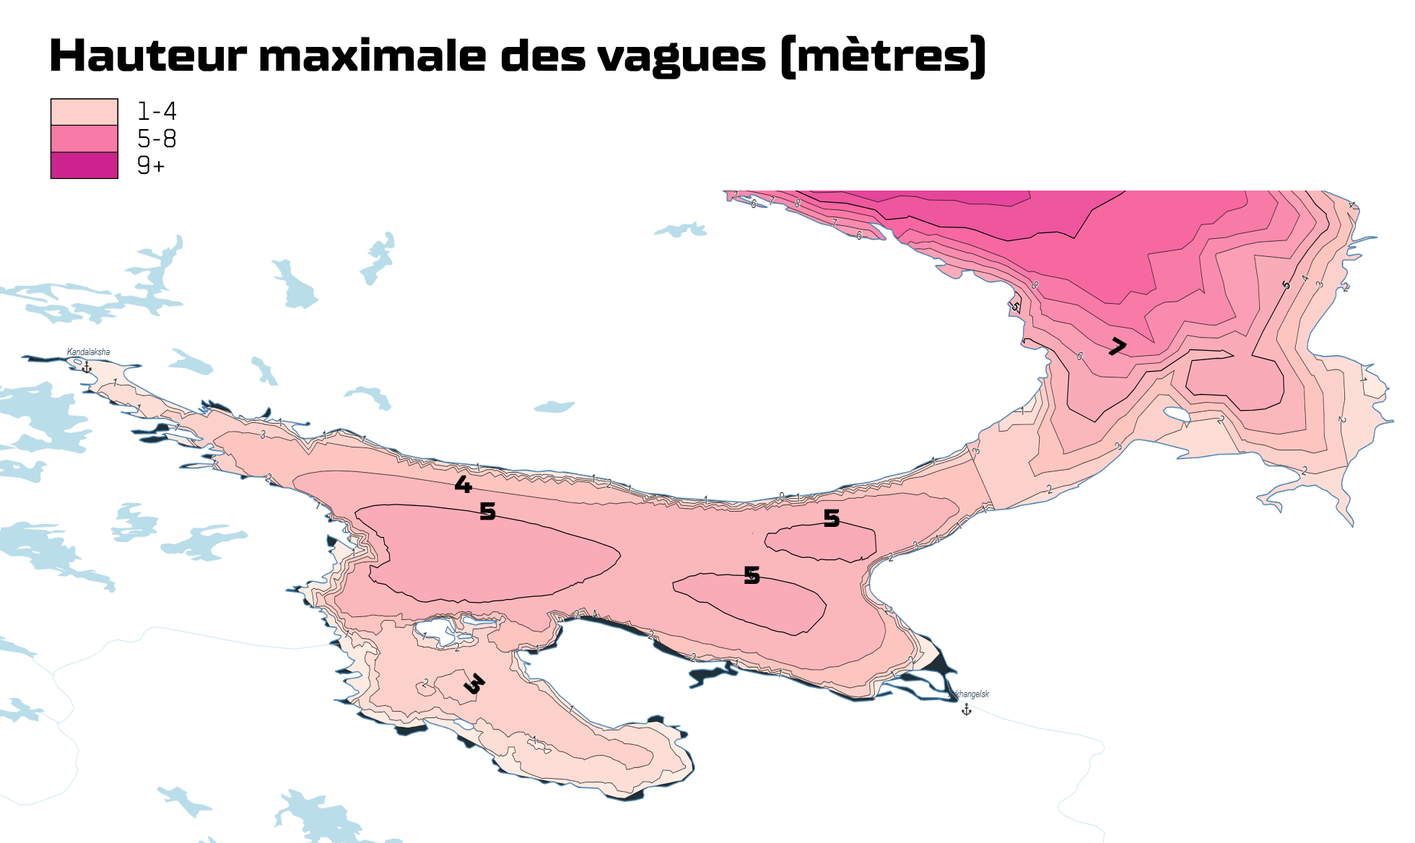
<style>
.page{position:relative;width:1415px;height:843px;background:#ffffff}
.page>*{position:absolute;margin:0}
.t1{font:46.2px "TTSupermolotNeue-ExpXBold";letter-spacing:-0.02em;color:#000000}
.t2{font:30.3px "BlenderPro-Book";color:#000000}
.t3{font:25.3px "TTSupermolotNeue-ExpXBold";letter-spacing:-0.02em;color:#000000}
</style>
<div class="page">
<p class="t1" style="left:51px;top:35px;width:933px;height:45px">Hauteur maximale des vagues (mètres)</p>
<p class="t2" style="left:139px;top:101px;width:37px;height:19px">1-4</p>
<p class="t2" style="left:138px;top:128px;width:37px;height:20px">5-8</p>
<p class="t2" style="left:138px;top:155px;width:27px;height:20px">9+</p>
<p class="t3" style="left:1108px;top:336px;width:19px;height:20px;rotate:30deg">7</p>
<p class="t3" style="left:455px;top:475px;width:17px;height:18px">4</p>
<p class="t3" style="left:480px;top:502px;width:16px;height:18px">5</p>
<p class="t3" style="left:823px;top:509px;width:16px;height:18px">5</p>
<p class="t3" style="left:744px;top:566px;width:16px;height:18px">5</p>
<p class="t3" style="left:463px;top:672px;width:23px;height:22px;rotate:43deg">3</p>
</div>
